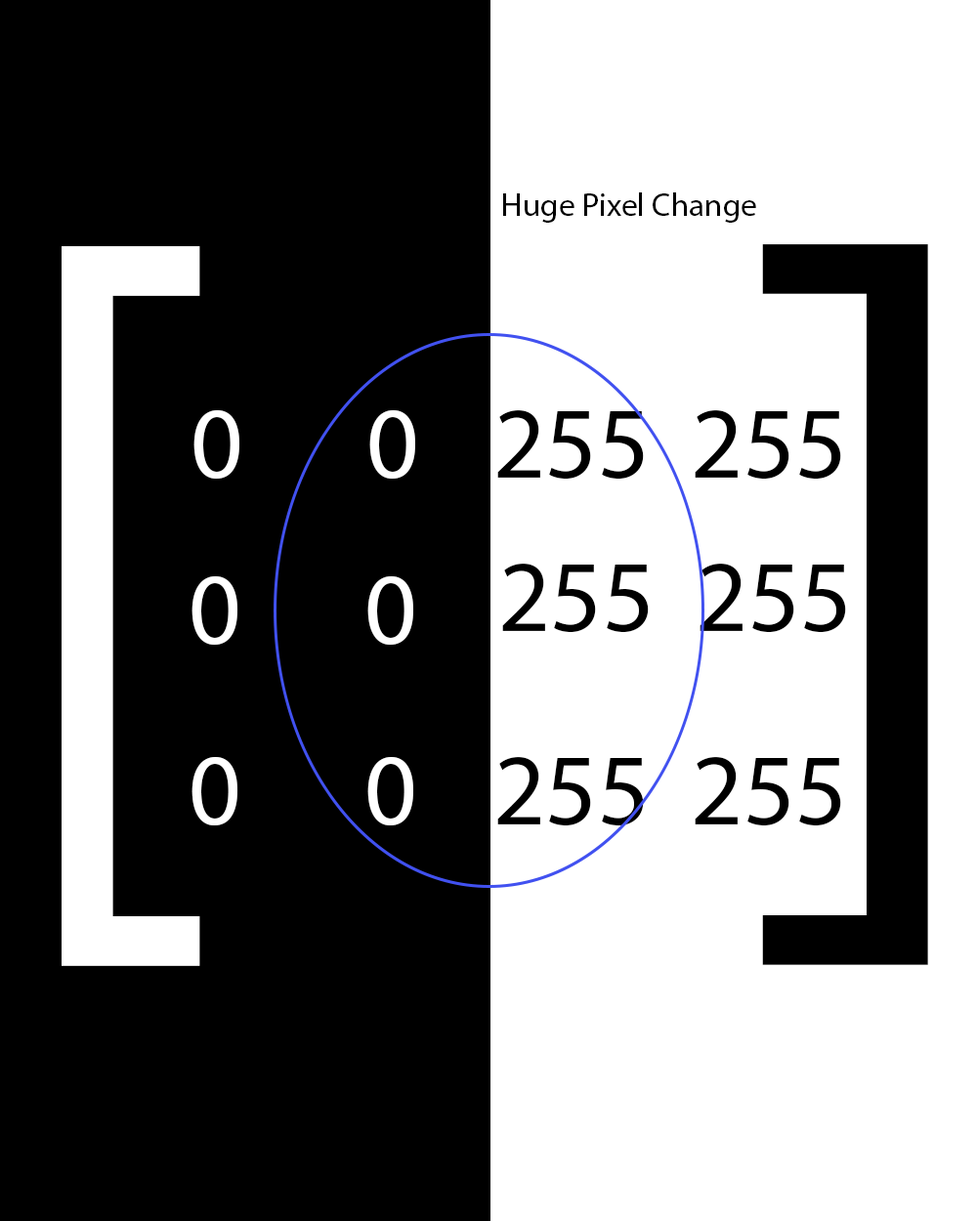
<style>
.page{position:relative;width:977px;height:1221px;background:#000000}
.page>*{position:absolute;margin:0}
.t1{font:32.6px "MyriadPro-Regular";color:#000000}
.t2{font:903px "MyriadPro-Regular";color:#000000}
.t3{font:903px "MyriadPro-Regular";color:#ffffff;scale:0.83 1}
.t4{font:101.7px "MyriadPro-Regular";color:#ffffff}
.t5{font:101.7px "MyriadPro-Regular";color:#000000}
</style>
<div class="page">
<p class="t1" style="left:503px;top:192px;width:253px;height:31px">Huge Pixel Change</p>
<p class="t2" style="left:762px;top:244px;width:166px;height:721px">]</p>
<p class="t3" style="left:62px;top:246px;width:138px;height:720px">[</p>
<p class="t4" style="left:193px;top:410px;width:222px;height:69px">0  0</p>
<p class="t5" style="left:497px;top:410px;width:344px;height:70px">255  255</p>
<p class="t5" style="left:502px;top:564px;width:344px;height:69px">255  255</p>
<p class="t4" style="left:191px;top:576px;width:222px;height:69px">0  0</p>
<p class="t4" style="left:191px;top:757px;width:222px;height:68px">0  0</p>
<p class="t5" style="left:497px;top:757px;width:344px;height:69px">255  255</p>
</div>
